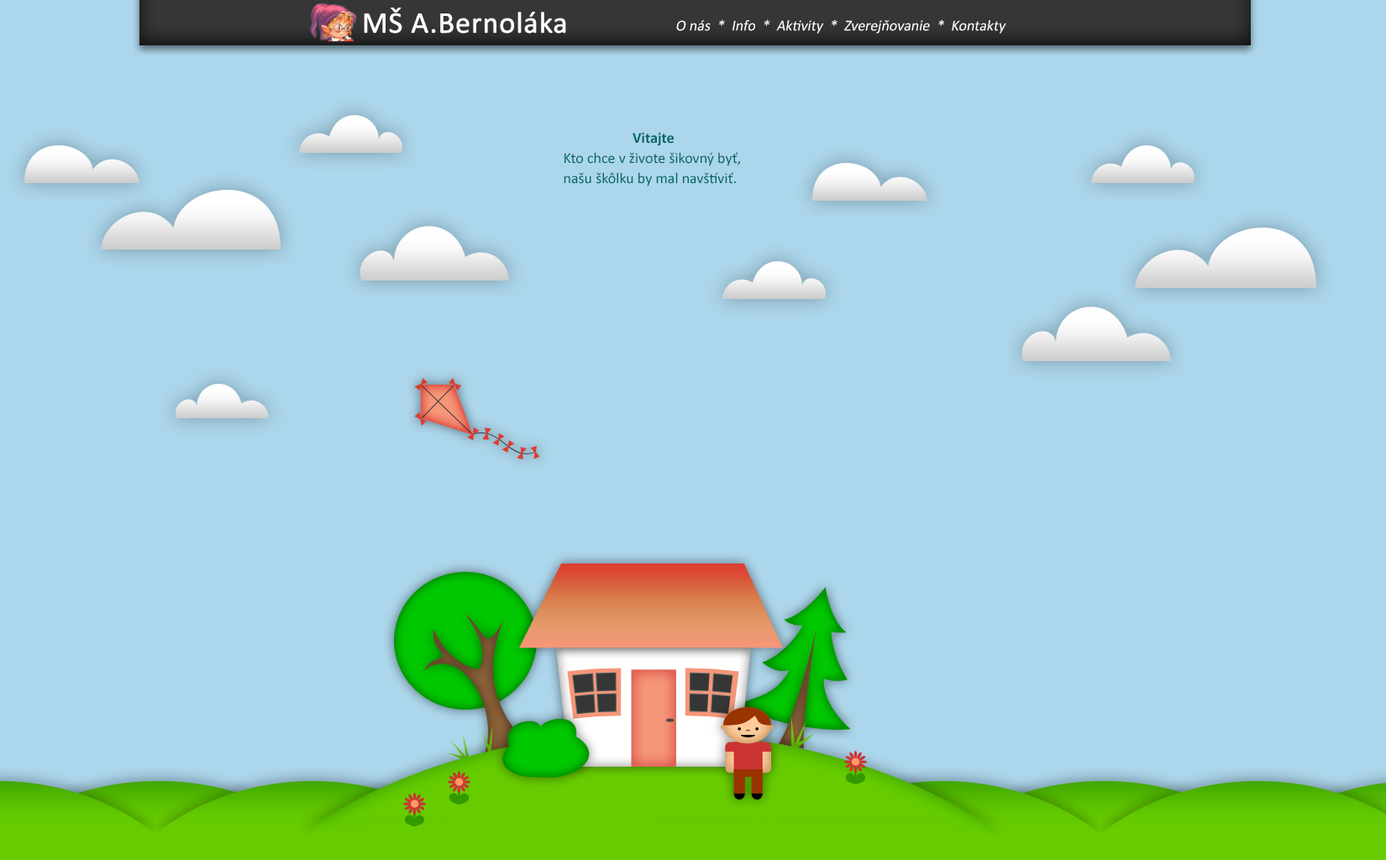
<style>
.page{position:relative;width:1386px;height:860px;background:#acd6eb}
.page>*{position:absolute;margin:0}
.t1{font:30.2px "Calibri";color:#fefefe;font-weight:bold}
.t2{font:15.1px "Calibri";color:#fefefe;font-style:italic}
.t3{font:15.1px/20.2px "Calibri";color:#006666}
.t4{font:15.1px/20.2px "Calibri-Bold";color:#006666}
</style>
<div class="page">
<p class="t1" style="left:364px;top:8px;width:202px;height:26px">MŠ A.Bernoláka</p>
<p class="t2" style="left:676px;top:19px;width:330px;height:15px">O nás  *  Info  *  Aktivity  *  Zverejňovanie  *  Kontakty</p>
<p class="t3" style="left:564px;top:133px;width:176px;height:53px;text-align:center"><span class="t4">Vitajte<br></span>Kto chce v živote šikovný byť, <br>našu škôlku by mal navštíviť.</p>
</div>
